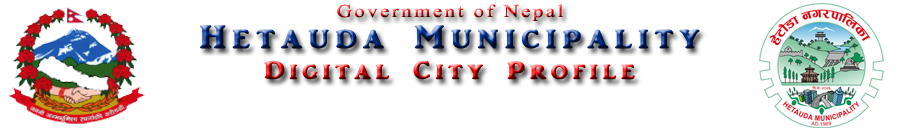
<style>
.page{position:relative;width:900px;height:130px;background:#ffffff}
.page>*{position:absolute;margin:0}
.t1{font:32.6px/30.8px "ARJULIAN";letter-spacing:0.16em;font-weight:bold;scale:1.15 1}
.t2{font:18.1px/30.8px "TimesNewRomanPSMT";letter-spacing:0.12em;scale:1.15 1}
.t3{font:25.4px/30.8px "ARJULIAN";letter-spacing:0.16em;font-weight:bold;scale:1.15 1}
</style>
<div class="page">
<p class="t1" style="left:200px;top:4px;width:500px;height:76px;text-align:center"><span class="t2">Government of Nepal<br></span>Hetauda Municipality<br><span class="t3">Digital City Profile</span></p>
</div>
